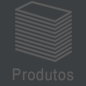
<style>
.page{position:relative;width:86px;height:86px;background:#3c3f41}
.page>*{position:absolute;margin:0}
.t1{font:15.6px "Helvetica-Normal";letter-spacing:0.06em;color:#5d5d5d;scale:0.89 1}
</style>
<div class="page">
<p class="t1" style="left:12px;top:68px;width:62px;height:13px">Produtos</p>
</div>
